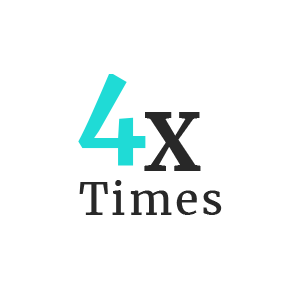
<style>
.page{position:relative;width:293px;height:293px;background:#ffffff}
.page>*{position:absolute;margin:0}
.t1{font:108.3px "Merriweather-Bold";color:#1fdbd6}
.t2{font:78px "Merriweather-Bold";letter-spacing:0.06em;color:#282828}
.t3{font:43.3px "Merriweather-Regular";letter-spacing:0.06em;color:#282828}
</style>
<div class="page">
<p class="t1" style="left:78px;top:74px;width:68px;height:92px">4</p>
<p class="t2" style="left:144px;top:112px;width:57px;height:59px">X</p>
<p class="t3" style="left:79px;top:180px;width:143px;height:35px">Times</p>
</div>
